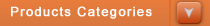
<style>
.page{position:relative;width:210px;height:26px}
.page>*{position:absolute;margin:0}
.t1{font:13px "ArialMT";letter-spacing:0.075em;color:#fcfafa;font-weight:bold}
</style>
<div class="page">
<p class="t1" style="left:11px;top:6px;width:141px;height:13px">Products Categories</p>
</div>
